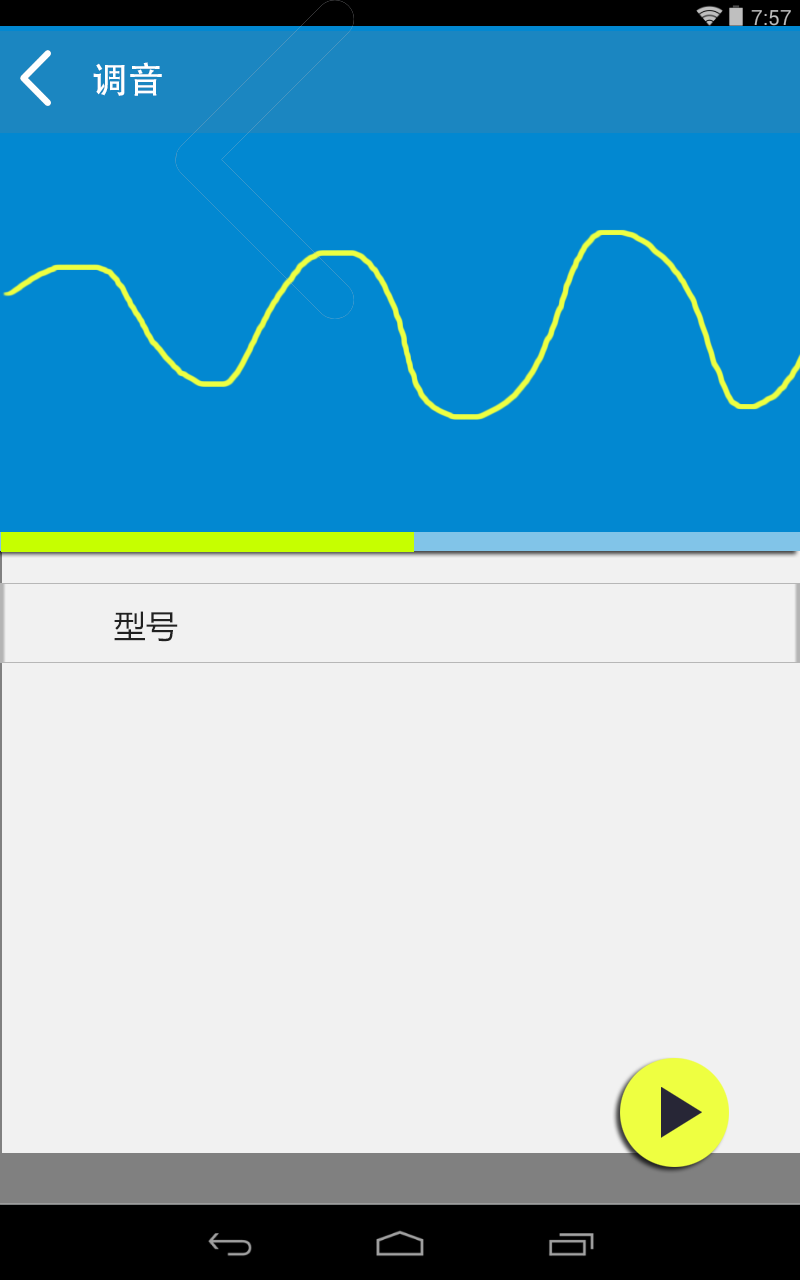
<style>
.page{position:relative;width:800px;height:1280px;background:#f1f1f1}
.page>*{position:absolute;margin:0}
.t1{font:36px "AdobeHeitiStd-Regular";color:#ffffff}
.t2{font:32px "MicrosoftYaHei";color:#212121}
</style>
<div class="page">
<p class="t1" style="left:93px;top:62px;width:69px;height:34px">调音</p>
<p class="t2" style="left:114px;top:611px;width:64px;height:31px">型号</p>
</div>
